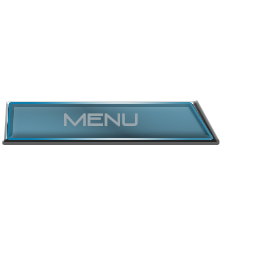
<style>
.page{position:relative;width:256px;height:256px;background:#ffffff}
.page>*{position:absolute;margin:0}
.t1{font:16.7px "VenusRising-Regular";color:#98a5ab;text-transform:uppercase}
</style>
<div class="page">
<p class="t1" style="left:64px;top:113px;width:74px;height:14px">Menu</p>
</div>
